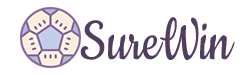
<style>
.page{position:relative;width:250px;height:75px;background:#ffffff}
.page>*{position:absolute;margin:0}
.t1{font:66.8px "Cookie-Regular";color:#523d61;scale:0.86 1}
</style>
<div class="page">
<p class="t1" style="left:80px;top:17px;width:155px;height:43px">SureWin</p>
</div>
